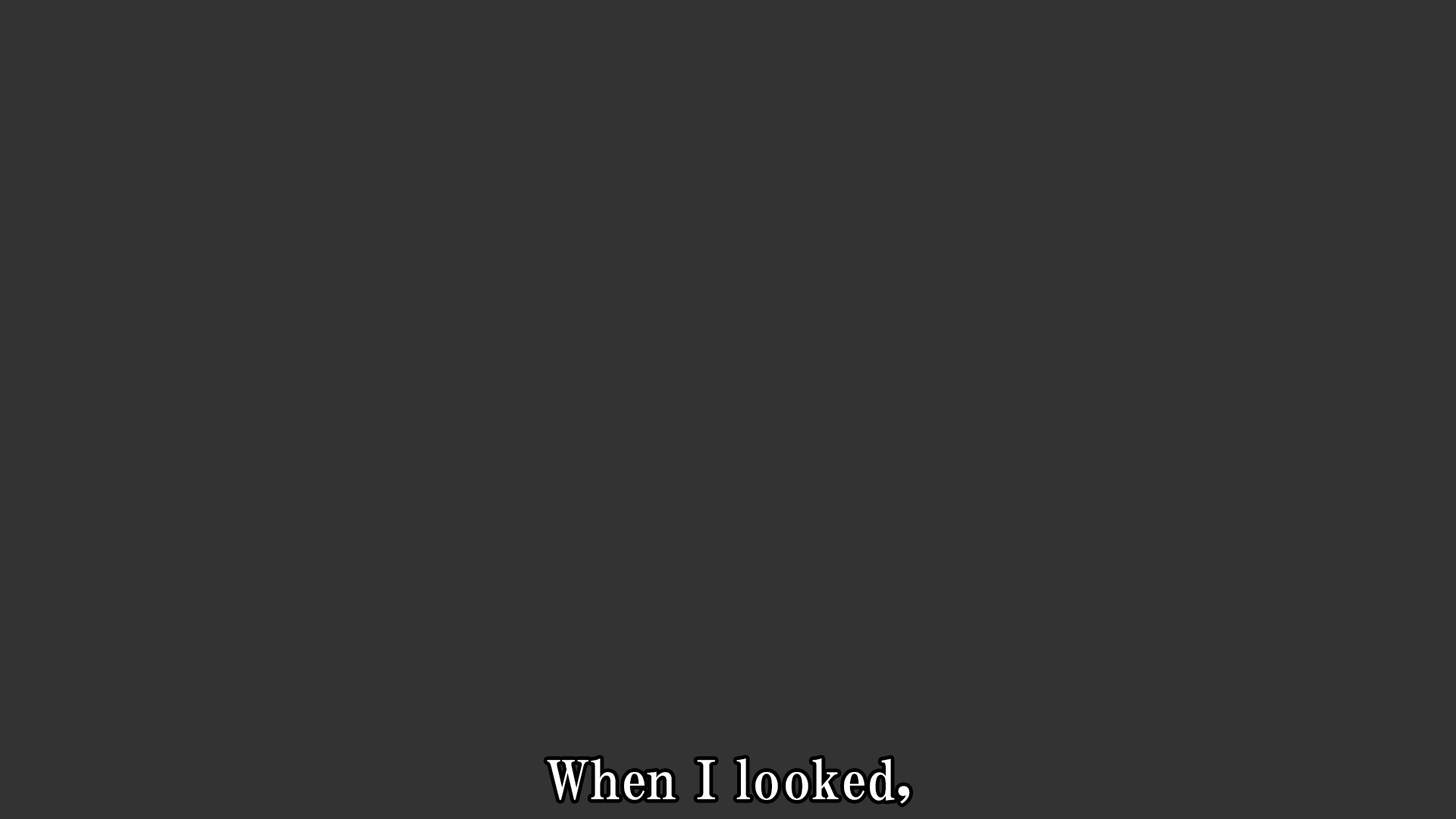
<style>
.page{position:relative;width:1456px;height:819px;background:#333333}
.page>*{position:absolute;margin:0}
.t1{font:53.1px "HGPMinchoE";letter-spacing:0.025em;color:#ffffff}
</style>
<div class="page">
<p class="t1" style="left:547px;top:758px;width:363px;height:46px">When I looked,</p>
</div>
